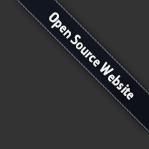
<style>
.page{position:relative;width:149px;height:149px;background:#333333}
.page>*{position:absolute;margin:0}
.t1{font:15.9px "Collegiate";color:#ffffff}
</style>
<div class="page">
<p class="t1" style="left:49px;top:12px;width:85px;height:88px;rotate:45deg">Open Source Website</p>
</div>
